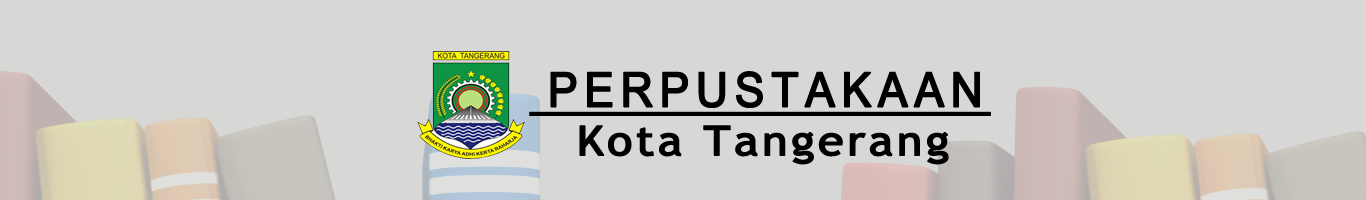
<style>
.page{position:relative;width:1366px;height:200px;background:#d7d7d6}
.page>*{position:absolute;margin:0}
.t1{font:47.9px "ArialNarrow";letter-spacing:0.1em;color:#000000;font-weight:bold;scale:1.13 1}
.t2{font:41.1px "TrebuchetMS";letter-spacing:0.05em;color:#000000;font-weight:bold;scale:1.13 1}
</style>
<div class="page">
<p class="t1" style="left:550px;top:71px;width:430px;height:37px">PERPUSTAKAAN</p>
<p class="t2" style="left:579px;top:125px;width:370px;height:40px">Kota Tangerang</p>
</div>
